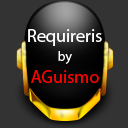
<style>
.page{position:relative;width:128px;height:128px;background:#333333}
.page>*{position:absolute;margin:0}
.t1{font:18px "MyriadPro-Regular";color:#ffffff}
.t2{font:14px "MyriadPro-Regular";color:#ffffff}
.t3{font:18px "MyriadPro-Regular";color:#fe0000}
</style>
<div class="page">
<p class="t1" style="left:28px;top:29px;width:74px;height:17px">Requireris</p>
<p class="t2" style="left:58px;top:51px;width:14px;height:13px">by</p>
<p class="t3" style="left:31px;top:70px;width:68px;height:13px">AGuismo</p>
</div>
